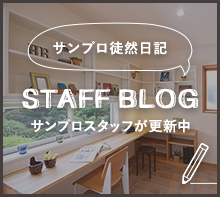
<style>
.page{position:relative;width:223px;height:197px}
.page>*{position:absolute;margin:0}
.t1{font:14px "YuGo-Bold";letter-spacing:0.04em;color:#ffffff}
.t2{font:20px "MdN-SWEATSHIRT";letter-spacing:0.04em;color:#ffffff}
.t3{font:14px "YuGo-Bold";letter-spacing:-0.06em;color:#ffffff}
.t4{font:14px "YuGo-Bold";color:#ffffff}
</style>
<div class="page">
<p class="t1" style="left:53px;top:41px;width:114px;height:14px">サンプロ徒然日記</p>
<p class="t2" style="left:22px;top:88px;width:176px;height:21px">STAFF BLOG</p>
<p class="t3" style="left:31px;top:119px;width:159px;height:14px">サンプロスタッフ<span class="t4">が更新中</span></p>
</div>
